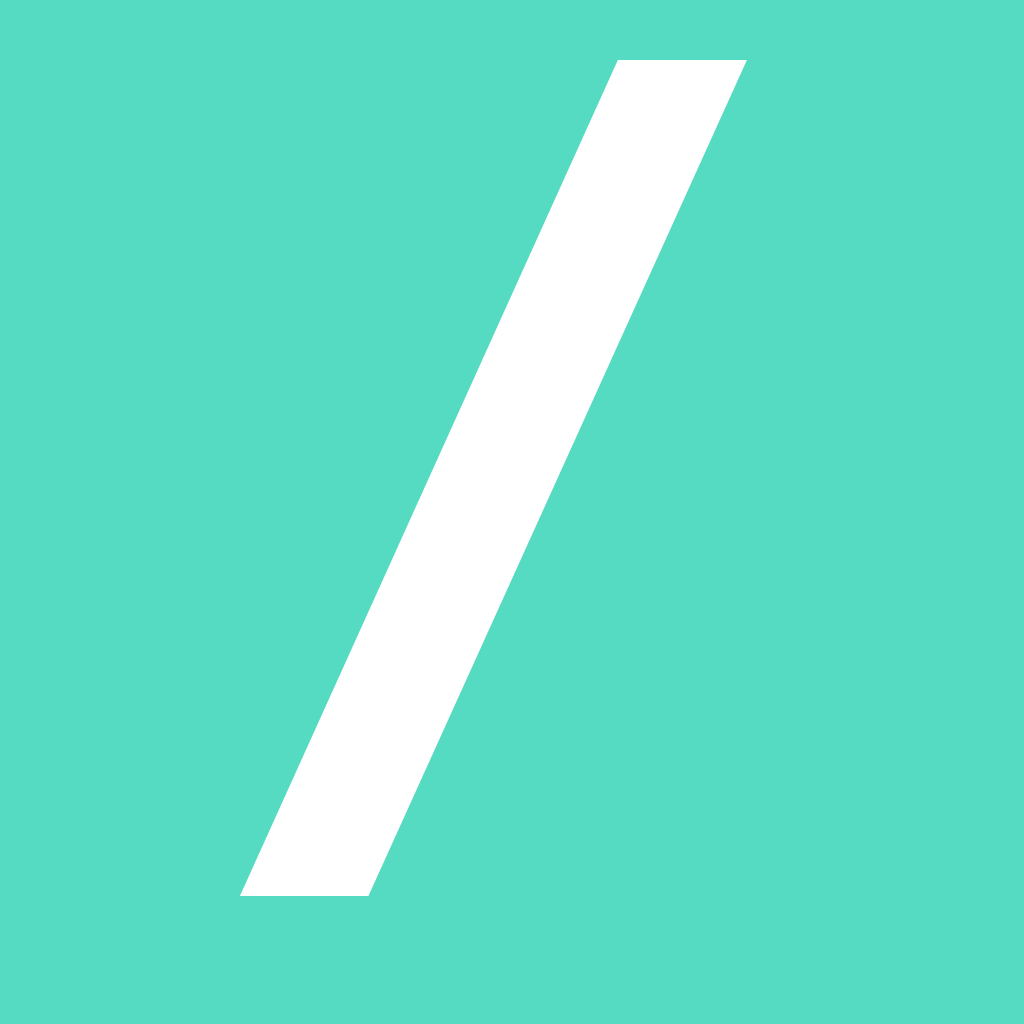
<style>
.page{position:relative;width:1024px;height:1024px;background:#54dbc2}
.page>*{position:absolute;margin:0}
.t1{font:1051.6px "Consolas-Bold";letter-spacing:0.01em;color:#ffffff;scale:1.05 1}
</style>
<div class="page">
<p class="t1" style="left:239px;top:60px;width:508px;height:836px">/</p>
</div>
